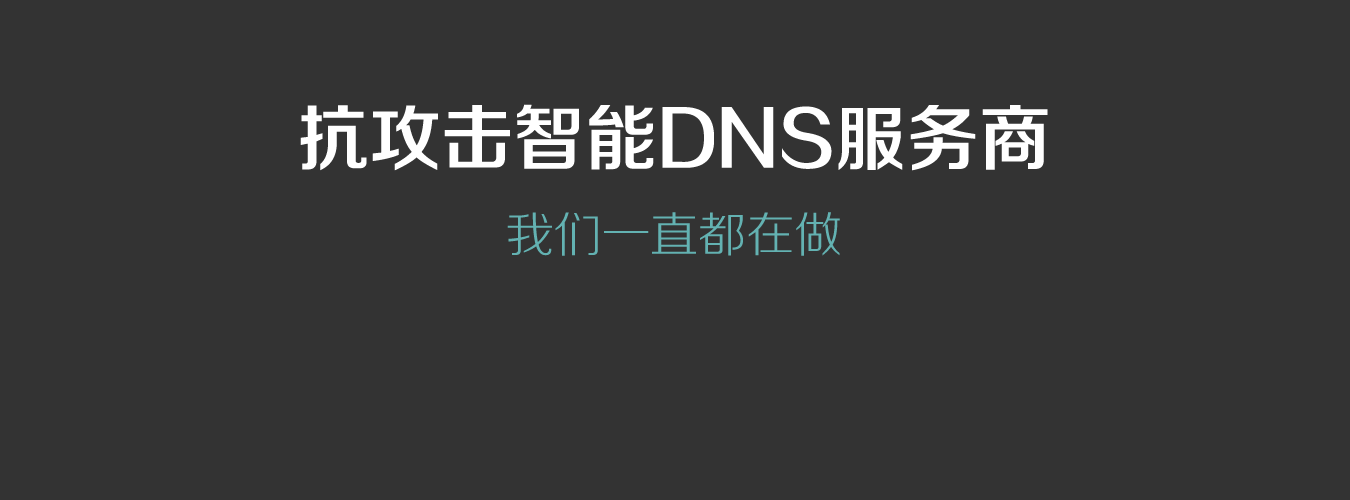
<style>
.page{position:relative;width:1350px;height:500px;background:#333333}
.page>*{position:absolute;margin:0}
.t1{font:72px "FZZZHONGJW--GB1-0";color:#ffffff}
.t2{font:48px "FZZXHJW--GB1-0";color:#63b2b2}
</style>
<div class="page">
<p class="t1" style="left:300px;top:104px;width:748px;height:67px">抗攻击智能DNS服务商</p>
<p class="t2" style="left:507px;top:212px;width:333px;height:44px"><span class="t1">     </span>我们一直都在做</p>
</div>
